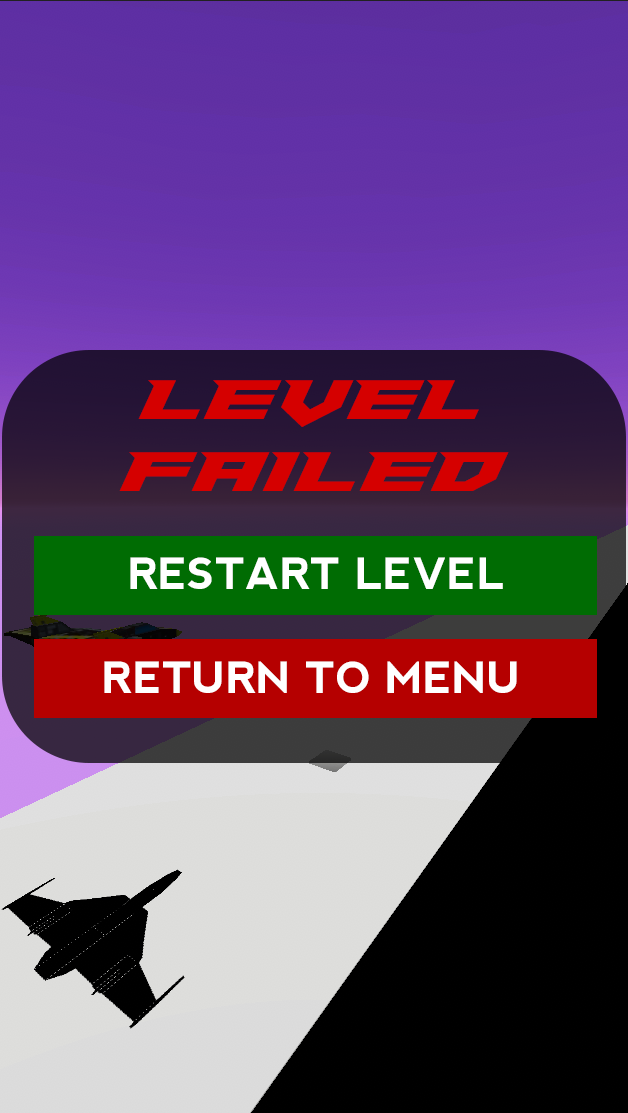
<style>
.page{position:relative;width:628px;height:1113px}
.page>*{position:absolute;margin:0}
.t1{font:60px "PaladinsExpanded";color:#d50000}
.t2{font:43px "nevis-Bold";color:#ffffff}
</style>
<div class="page">
<p class="t1" style="left:119px;top:380px;width:390px;height:111px;text-align:center">LEVEL<br>FAILED</p>
<p class="t2" style="left:130px;top:557px;width:373px;height:32px">RESTART LEVEL</p>
<p class="t2" style="left:104px;top:661px;width:413px;height:32px">RETURN TO MENU</p>
</div>
